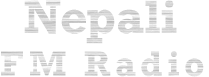
<style>
.page{position:relative;width:209px;height:77px;background:#ffffff}
.page>*{position:absolute;margin:0}
.t1{font:36px/43.5px "Rockwell-Bold";letter-spacing:0.12em;color:#d9d9d9}
.t2{font:48px "Rockwell-Bold";color:#d9d9d9}
</style>
<div class="page">
<p class="t1" style="left:1px;top:0px;width:203px;height:77px;text-align:center"><span class="t2">Nepali<br></span>FM Radio</p>
</div>
